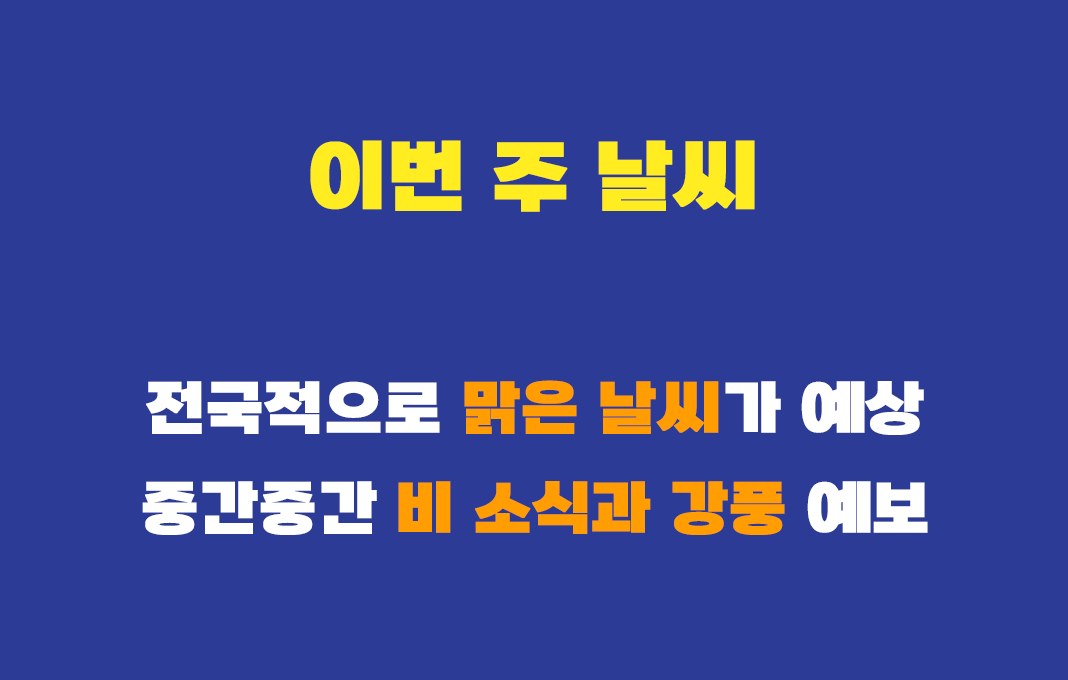
<style>
.page{position:relative;width:1068px;height:680px;background:#2c3b96}
.page>*{position:absolute;margin:0}
.t1{font:80px "SBAggroB";color:#ffed22;font-weight:bold}
.t2{font:60px/100px "SBAggroB";color:#ffffff;font-weight:bold}
.t3{font:60px/100px "SBAggroB";color:#ff9d03;font-weight:bold}
</style>
<div class="page">
<p class="t1" style="left:310px;top:140px;width:445px;height:72px">이번 주 날씨</p>
<p class="t2" style="left:142px;top:380px;width:786px;height:155px;text-align:center">전국적으로 <span class="t3">맑은 날씨</span>가 예상<br>중간중간 <span class="t3">비 소식과 강풍</span> 예보</p>
</div>
